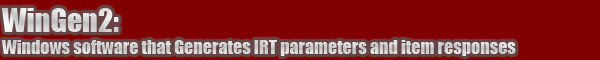
<style>
.page{position:relative;width:600px;height:60px;background:#800000}
.page>*{position:absolute;margin:0}
.t1{font:18px "Impact";color:#d5d5d5}
.t2{font:30px "Impact";color:#d5d5d5}
</style>
<div class="page">
<p class="t1" style="left:1px;top:8px;width:515px;height:48px"><span class="t2">WinGen2:<br></span>Windows software that Generates IRT parameters and item responses</p>
</div>
